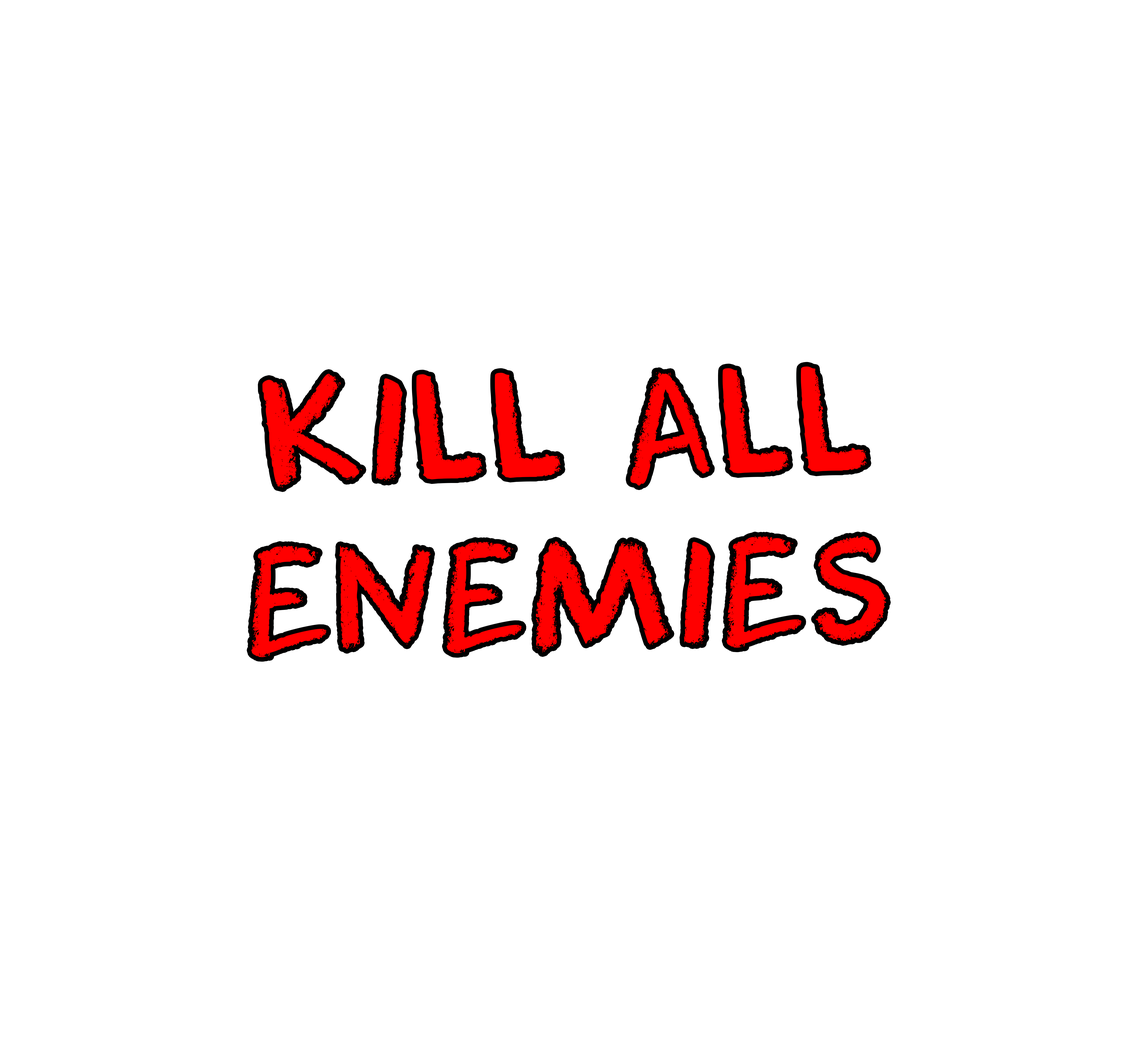
<style>
.page{position:relative;width:1139px;height:1047px;background:#ffffff}
.page>*{position:absolute;margin:0}
.t1{font:141.5px "DKCoolCrayon";letter-spacing:0.04em;color:#ff0000}
</style>
<div class="page">
<p class="t1" style="left:251px;top:366px;width:635px;height:291px;text-align:center;rotate:-1deg">KILL ALL<br>ENEMIES</p>
</div>
